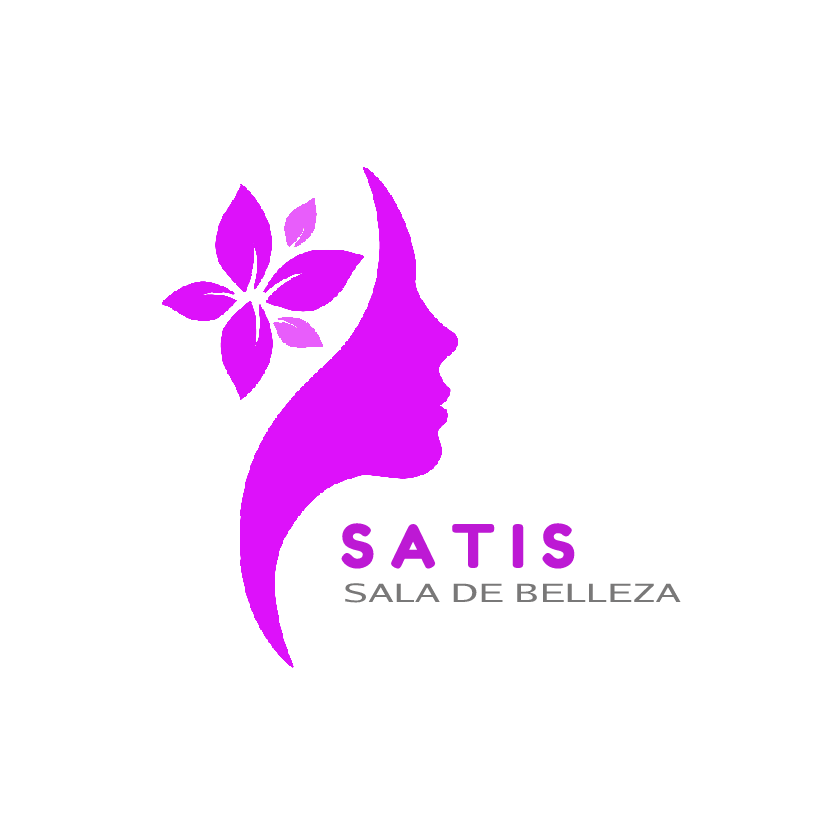
<style>
.page{position:relative;width:820px;height:820px;background:#ffffff}
.page>*{position:absolute;margin:0}
.t1{font:60px "FredokaOne-Regular";color:#bd19d4}
.t2{font:25.3px "GoRegular";color:#797878;scale:1.5 1}
</style>
<div class="page">
<p class="t1" style="left:341px;top:523px;width:234px;height:46px">S A T I S</p>
<p class="t2" style="left:345px;top:583px;width:336px;height:20px">SALA DE BELLEZA</p>
</div>
